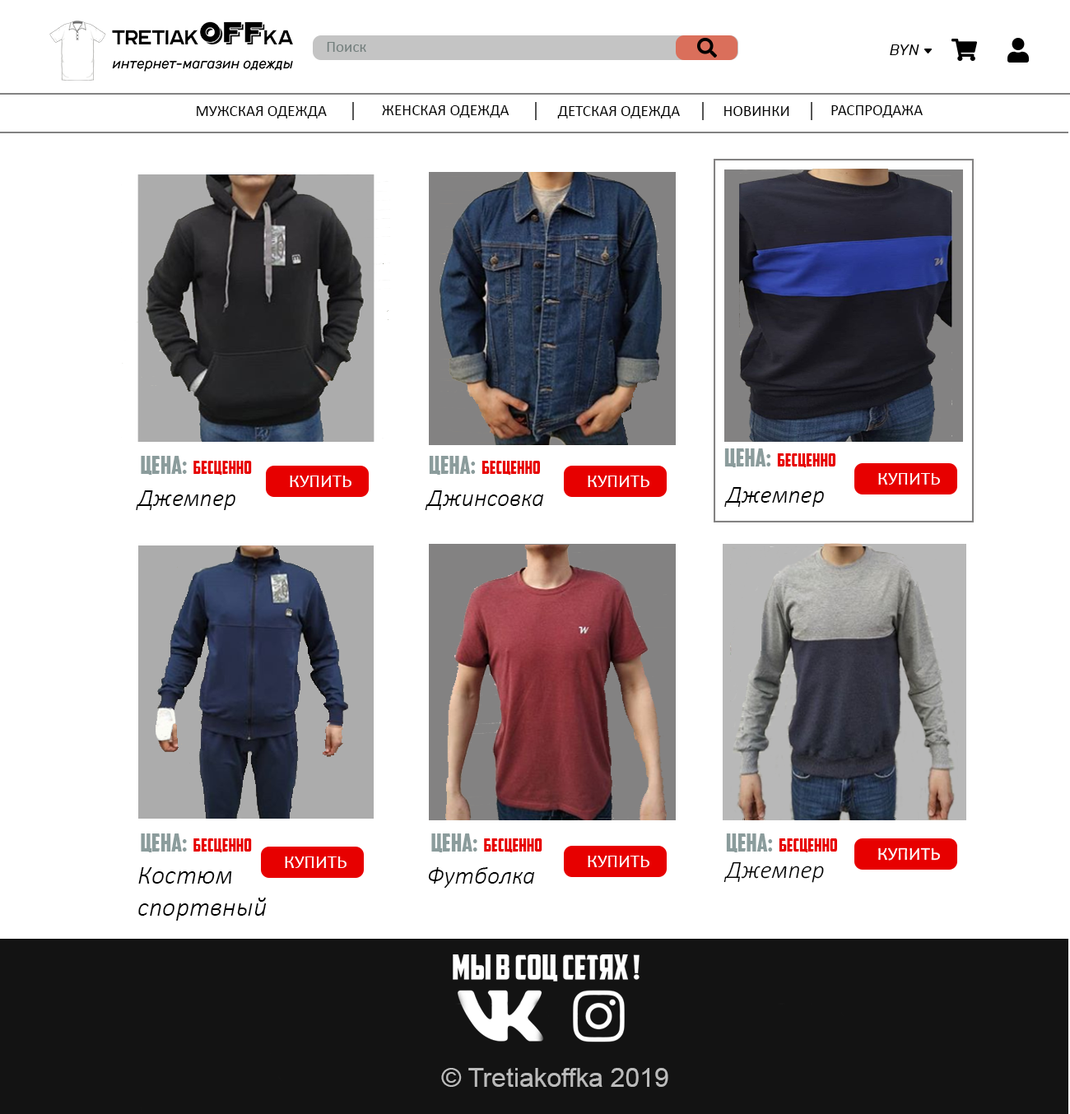
<style>
.page{position:relative;width:1070px;height:1114px;background:#ffffff}
.page>*{position:absolute;margin:0}
.t1{font:15.6px "Calibri";color:#737f7d}
.t2{font:14.8px "Rubik-Italic";color:#000000}
.t3{font:15.6px "Calibri";color:#000000}
.t4{font:24.7px "AmericanCaptainCyrillic";color:#8b9c9c}
.t5{font:17.9px "AmericanCaptainCyrillic";color:#e70000}
.t6{font:18.1px "Candara";color:#ffffff}
.t7{font:24.7px "Calibri-LightItalic";color:#000000}
.t8{font:18.2px "Candara";color:#ffffff}
.t9{font:26.6px "Calibri-LightItalic";color:#000000}
.t10{font:24.8px "Calibri-LightItalic";color:#000000}
.t11{font:26.2px "ArialMT";color:#bbbbbb}
</style>
<div class="page">
<p class="t1" style="left:327px;top:42px;width:39px;height:10px">Поиск</p>
<p class="t2" style="left:890px;top:44px;width:29px;height:11px">BYN</p>
<p class="t3" style="left:197px;top:106px;width:130px;height:13px">МУЖСКАЯ ОДЕЖДА</p>
<p class="t3" style="left:382px;top:105px;width:127px;height:13px">ЖЕНСКАЯ ОДЕЖДА</p>
<p class="t3" style="left:557px;top:106px;width:123px;height:13px">ДЕТСКАЯ ОДЕЖДА</p>
<p class="t3" style="left:724px;top:106px;width:65px;height:10px">НОВИНКИ</p>
<p class="t3" style="left:831px;top:105px;width:92px;height:13px">РАСПРОДАЖА</p>
<p class="t4" style="left:724px;top:449px;width:47px;height:19px">Цена:</p>
<p class="t4" style="left:141px;top:456px;width:46px;height:19px">Цена:</p>
<p class="t5" style="left:193px;top:461px;width:59px;height:14px">Бесценно</p>
<p class="t4" style="left:429px;top:456px;width:47px;height:19px">Цена:</p>
<p class="t5" style="left:481px;top:461px;width:59px;height:14px">Бесценно</p>
<p class="t5" style="left:777px;top:454px;width:58px;height:14px">Бесценно</p>
<p class="t6" style="left:878px;top:473px;width:62px;height:12px">КУПИТЬ</p>
<p class="t6" style="left:290px;top:476px;width:61px;height:11px">КУПИТЬ</p>
<p class="t6" style="left:588px;top:476px;width:61px;height:11px">КУПИТЬ</p>
<p class="t7" style="left:136px;top:491px;width:99px;height:19px">Джемпер</p>
<p class="t7" style="left:425px;top:491px;width:119px;height:19px">Джинсовка</p>
<p class="t7" style="left:724px;top:487px;width:100px;height:20px">Джемпер</p>
<p class="t4" style="left:141px;top:834px;width:46px;height:19px">Цена:</p>
<p class="t4" style="left:431px;top:834px;width:46px;height:19px">Цена:</p>
<p class="t4" style="left:726px;top:834px;width:47px;height:19px">Цена:</p>
<p class="t5" style="left:193px;top:839px;width:59px;height:14px">Бесценно</p>
<p class="t5" style="left:484px;top:839px;width:58px;height:14px">Бесценно</p>
<p class="t5" style="left:779px;top:839px;width:58px;height:14px">Бесценно</p>
<p class="t6" style="left:285px;top:857px;width:62px;height:11px">КУПИТЬ</p>
<p class="t6" style="left:588px;top:856px;width:61px;height:12px">КУПИТЬ</p>
<p class="t8" style="left:878px;top:848px;width:62px;height:13px">КУПИТЬ</p>
<p class="t9" style="left:138px;top:868px;width:129px;height:53px">Костюм спортвный</p>
<p class="t7" style="left:428px;top:868px;width:107px;height:20px">Футболка</p>
<p class="t10" style="left:723px;top:862px;width:101px;height:21px">Джемпер</p>
<p class="t11" style="left:441px;top:1068px;width:227px;height:19px">© Tretiakoffka 2019</p>
</div>
